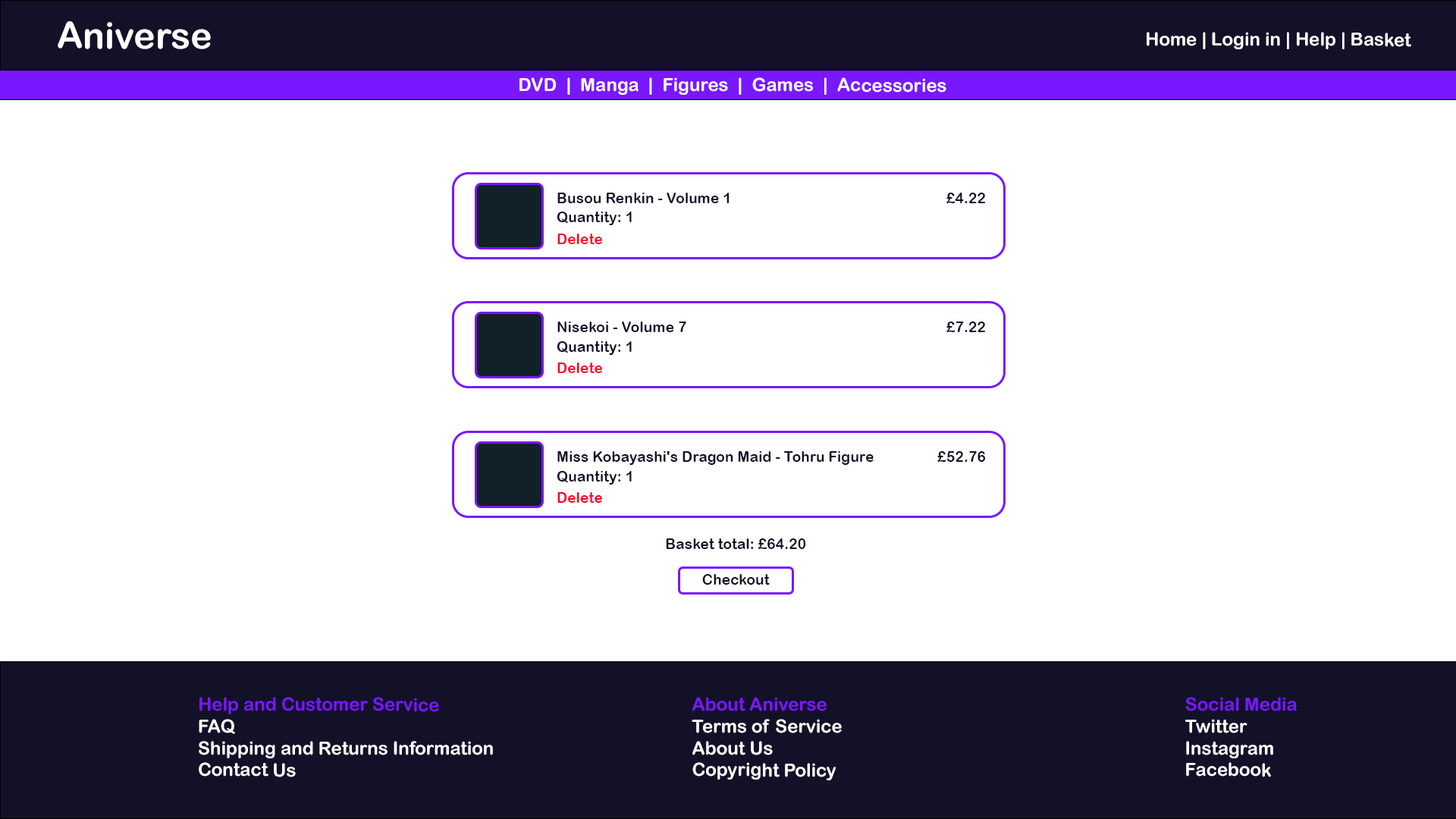
<style>
.page{position:relative;width:1456px;height:819px;background:#ffffff}
.page>*{position:absolute;margin:0}
.t1{font:36.4px "ArialRoundedMTBold";color:#ffffff}
.t2{font:18.2px "ArialRoundedMTBold";color:#ffffff}
.t3{font:14.8px "ArialRoundedMTBold";color:#121128}
.t4{font:14.8px "ArialRoundedMTBold";color:#ff002a}
.t5{font:14.6px "ArialRoundedMTBold";color:#121128}
.t6{font:18.2px "ArialRoundedMTBold";color:#7917ff}
</style>
<div class="page">
<p class="t1" style="left:58px;top:21px;width:153px;height:28px">Aniverse</p>
<p class="t2" style="left:1147px;top:32px;width:264px;height:17px">Home | Login in | Help | Basket</p>
<p class="t2" style="left:519px;top:77px;width:427px;height:18px">DVD  |  Manga  |  Figures  |  Games  |  Accessories</p>
<p class="t3" style="left:557px;top:193px;width:173px;height:10px">Busou Renkin - Volume 1</p>
<p class="t3" style="left:946px;top:193px;width:40px;height:10px">£4.22</p>
<p class="t3" style="left:557px;top:212px;width:75px;height:13px">Quantity: 1</p>
<p class="t4" style="left:557px;top:234px;width:45px;height:10px">Delete</p>
<p class="t3" style="left:557px;top:322px;width:129px;height:10px">Nisekoi - Volume 7</p>
<p class="t3" style="left:946px;top:322px;width:40px;height:10px">£7.22</p>
<p class="t3" style="left:557px;top:341px;width:75px;height:14px">Quantity: 1</p>
<p class="t4" style="left:557px;top:362px;width:45px;height:11px">Delete</p>
<p class="t3" style="left:557px;top:451px;width:317px;height:14px">Miss Kobayashi's Dragon Maid - Tohru Figure</p>
<p class="t3" style="left:937px;top:451px;width:49px;height:11px">£52.76</p>
<p class="t3" style="left:557px;top:471px;width:75px;height:14px">Quantity: 1</p>
<p class="t4" style="left:557px;top:492px;width:45px;height:11px">Delete</p>
<p class="t5" style="left:666px;top:538px;width:140px;height:11px">Basket total: £64.20</p>
<p class="t5" style="left:702px;top:574px;width:68px;height:11px">Checkout</p>
<p class="t2" style="left:199px;top:697px;width:294px;height:80px"><span class="t6">Help and Customer Service<br></span>FAQ<br>Shipping and Returns Information<br>Contact Us</p>
<p class="t2" style="left:692px;top:697px;width:150px;height:83px"><span class="t6">About Aniverse<br></span>Terms of Service<br>About Us<br>Copyright Policy</p>
<p class="t2" style="left:1185px;top:697px;width:112px;height:80px"><span class="t6">Social Media<br></span>Twitter<br>Instagram<br>Facebook</p>
</div>
